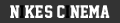
<style>
.page{position:relative;width:120px;height:23px;background:#333333}
.page>*{position:absolute;margin:0}
.t1{font:16.7px "SuperstarM54";color:#ffffff}
.t2{font:16.7px "SuperstarM54";color:#000000}
</style>
<div class="page">
<p class="t1" style="left:10px;top:5px;width:100px;height:13px">N<span class="t2">i</span>ke's c<span class="t2">i</span>nema</p>
</div>
